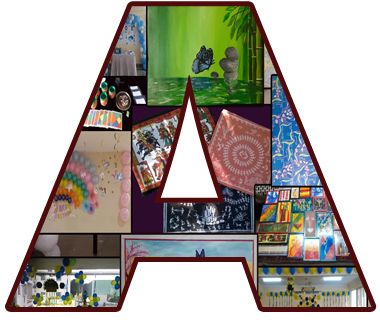
<style>
.page{position:relative;width:380px;height:329px;background:#ffffff}
.page>*{position:absolute;margin:0}
.t1{font:460.9px "TwCenMT-CondensedExtraBold";letter-spacing:0.025em;scale:1.53 1}
</style>
<div class="page">
<p class="t1" style="left:9px;top:6px;width:363px;height:301px">A</p>
</div>
